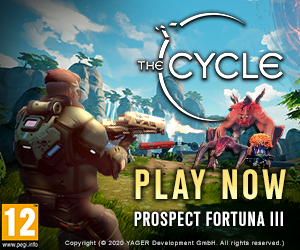
<style>
.page{position:relative;width:300px;height:250px}
.page>*{position:absolute;margin:0}
.t1{font:42px "Chairdrobe-Bold";letter-spacing:0.1em}
.t2{font:20px "Chairdrobe-Bold";letter-spacing:0.055em;color:#ffffff}
.t3{font:6px "ArialMT";letter-spacing:0.1em}
</style>
<div class="page">
<p class="t1" style="left:135px;top:169px;width:151px;height:31px">PLAY NOW</p>
<p class="t2" style="left:134px;top:211px;width:149px;height:15px">PROSPECT FORTUNA III</p>
<p class="t3" style="left:65px;top:240px;width:219px;height:7px">Copyright (© 2020 YAGER Development GmbH. All rights reserved.)</p>
</div>
